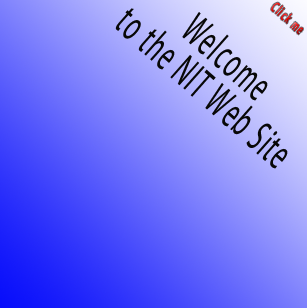
<style>
.page{position:relative;width:307px;height:308px}
.page>*{position:absolute;margin:0}
.t1{font:14.7px "MyriadPro-Regular";letter-spacing:0.2em;scale:0.54 1}
.t2{font:44.2px/38px "MyriadPro-Regular";letter-spacing:0.06em;color:#080808;scale:0.54 1}
</style>
<div class="page">
<p class="t1" style="left:271px;top:2px;width:32px;height:33px;rotate:41deg">Click me</p>
<p class="t2" style="left:115px;top:8px;width:173px;height:161px;text-align:center;rotate:41deg">Welcome <br>to the NIT Web Site</p>
</div>
